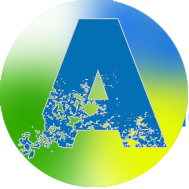
<style>
.page{position:relative;width:189px;height:189px;background:#ffffff}
.page>*{position:absolute;margin:0}
.t1{font:167.9px "C.A.Gatintas";color:#036fb4}
</style>
<div class="page">
<p class="t1" style="left:18px;top:19px;width:149px;height:140px">A</p>
</div>
